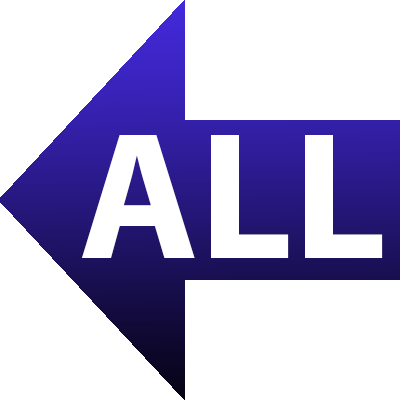
<style>
.page{position:relative;width:400px;height:400px;background:#ffffff}
.page>*{position:absolute;margin:0}
.t1{font:183px "MyriadPro-Bold";color:#ffffff}
</style>
<div class="page">
<p class="t1" style="left:82px;top:135px;width:301px;height:123px">ALL</p>
</div>
